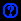
<style>
.page{position:relative;width:21px;height:21px;background:#000000}
.page>*{position:absolute;margin:0}
.t1{font:15px "TimesNewRomanPS-BoldMT";color:#0433ff}
</style>
<div class="page">
<p class="t1" style="left:7px;top:5px;width:7px;height:12px">?</p>
</div>
